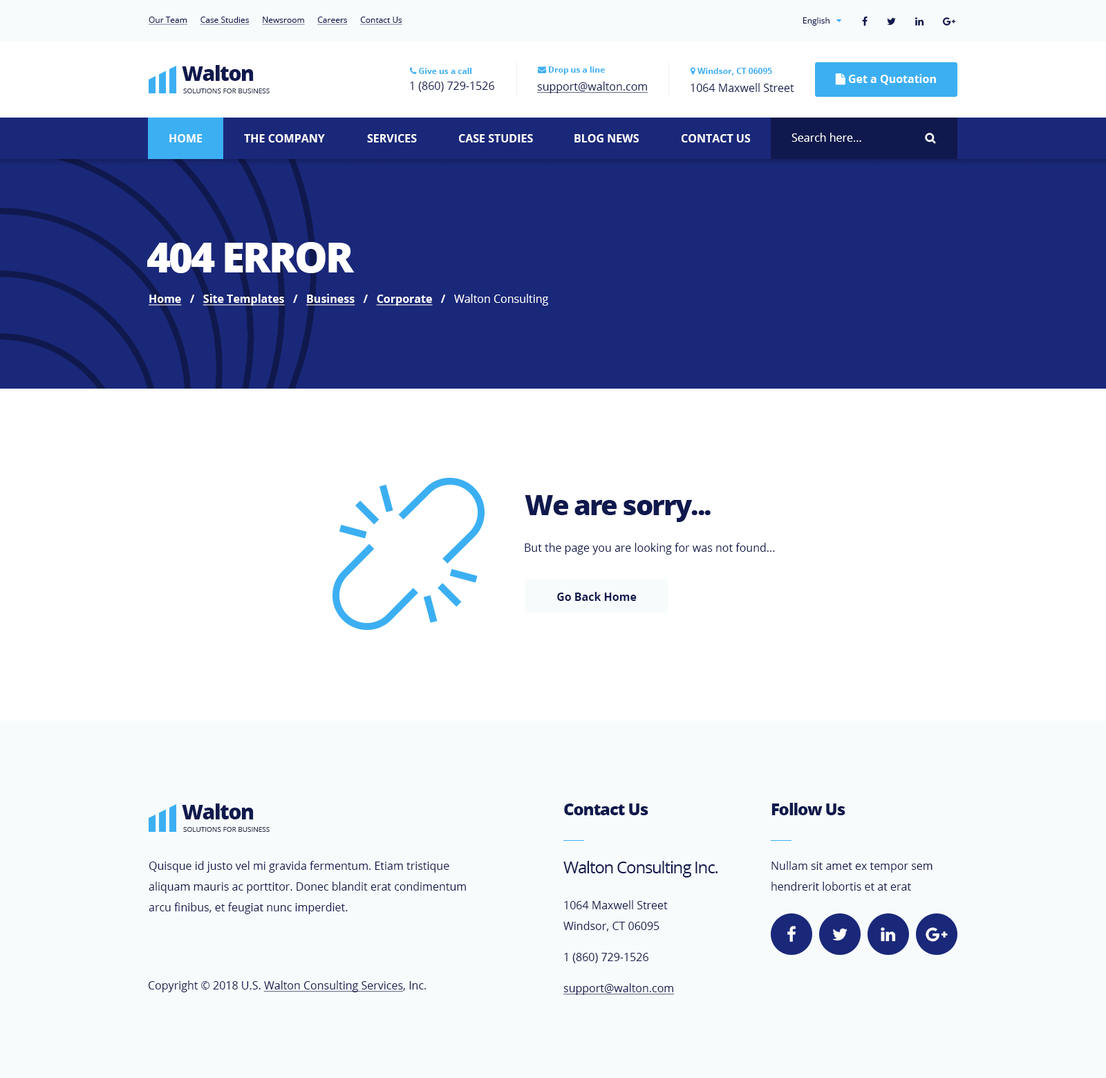
<style>
.page{position:relative;width:1106px;height:1078px;background:#ffffff}
.page>*{position:absolute;margin:0}
.t1{font:8.3px "OpenSans-Regular";color:#10194d;text-decoration:underline}
.t2{font:20.7px "OpenSans-ExtraBold";letter-spacing:-0.05em;color:#10194d}
.t3{font:6.9px "OpenSans-Regular";color:#283149}
.t4{font:11.1px "OpenSans-Regular";color:#10194d;text-transform:uppercase}
.t5{font:11.1px "OpenSans-Regular";color:#10194d;text-decoration:underline}
.t6{font:11.1px "OpenSans-Regular";color:#10194d}
.t7{font:11.1px "OpenSans-Bold";color:#ffffff}
.t8{font:11.1px "OpenSans-Regular";color:#ffffff}
.t9{font:41.5px "OpenSans-ExtraBold";letter-spacing:-0.05em;color:#ffffff;text-transform:uppercase}
.t10{font:11.1px "OpenSans-Bold";color:#ffffff;text-decoration:underline}
.t11{font:27.7px "OpenSans-ExtraBold";letter-spacing:-0.05em;color:#10194d}
.t12{font:11.1px "OpenSans-Bold";color:#10194d}
.t13{font:16.6px "OpenSans-ExtraBold";letter-spacing:-0.05em;color:#10194d}
.t14{font:11.1px/20.7px "OpenSans-Regular";color:#10194d}
.t15{font:16.6px "OpenSans-Regular";letter-spacing:-0.05em;color:#10194d}
</style>
<div class="page">
<p class="t1" style="left:149px;top:17px;width:253px;height:8px">Our Team      Case Studies      Newsroom      Careers      Contact Us</p>
<p class="t2" style="left:182px;top:65px;width:72px;height:16px">Walton</p>
<p class="t3" style="left:183px;top:89px;width:87px;height:4px">SOLUTIONS FOR BUSINESS</p>
<p class="t4" style="left:410px;top:82px;width:84px;height:10px">1 (860) 729-1526</p>
<p class="t5" style="left:537px;top:82px;width:112px;height:11px">support@walton.com</p>
<p class="t6" style="left:691px;top:83px;width:103px;height:9px">1064 Maxwell Street</p>
<p class="t7" style="left:169px;top:134px;width:33px;height:8px">HOME</p>
<p class="t7" style="left:244px;top:134px;width:81px;height:8px">THE COMPANY</p>
<p class="t7" style="left:367px;top:134px;width:50px;height:8px">SERVICES</p>
<p class="t7" style="left:459px;top:134px;width:74px;height:8px">CASE STUDIES</p>
<p class="t7" style="left:575px;top:134px;width:64px;height:8px">BLOG NEWS</p>
<p class="t7" style="left:682px;top:134px;width:69px;height:8px">CONTACT US</p>
<p class="t8" style="left:792px;top:133px;width:69px;height:9px">Search here...</p>
<p class="t9" style="left:147px;top:242px;width:208px;height:31px">404 error</p>
<p class="t8" style="left:149px;top:294px;width:399px;height:12px"><span class="t10">Home</span><span class="t7">   /   </span><span class="t10">Site Templates</span><span class="t7">   /   </span><span class="t10">Business</span><span class="t7">   /   </span><span class="t10">Corporate</span><span class="t7">   /   </span>Walton Consulting</p>
<p class="t11" style="left:525px;top:495px;width:186px;height:27px">We are sorry...</p>
<p class="t6" style="left:525px;top:543px;width:250px;height:12px">But the page you are looking for was not found...</p>
<p class="t12" style="left:557px;top:592px;width:80px;height:9px">Go Back Home</p>
<p class="t2" style="left:182px;top:803px;width:72px;height:16px">Walton</p>
<p class="t13" style="left:564px;top:803px;width:85px;height:12px">Contact Us</p>
<p class="t13" style="left:772px;top:803px;width:74px;height:12px">Follow Us</p>
<p class="t3" style="left:183px;top:827px;width:87px;height:5px">SOLUTIONS FOR BUSINESS</p>
<p class="t14" style="left:149px;top:861px;width:317px;height:53px">Quisque id justo vel mi gravida fermentum. Etiam tristique<br>aliquam mauris ac porttitor. Donec blandit erat condimentum<br>arcu finibus, et feugiat nunc imperdiet.</p>
<p class="t15" style="left:563px;top:861px;width:155px;height:16px">Walton Consulting Inc.</p>
<p class="t14" style="left:772px;top:861px;width:161px;height:30px">Nullam sit amet ex tempor sem<br>hendrerit lobortis et at erat</p>
<p class="t14" style="left:563px;top:900px;width:105px;height:31px">1064 Maxwell Street<br>Windsor, CT 06095</p>
<p class="t4" style="left:564px;top:953px;width:85px;height:10px">1 (860) 729-1526</p>
<p class="t5" style="left:148px;top:980px;width:278px;height:12px"><span class="t6">Copyright © 2018 U.S. </span>Walton Consulting Services<span class="t6">, Inc.</span></p>
<p class="t5" style="left:563px;top:983px;width:112px;height:12px">support@walton.com</p>
</div>
